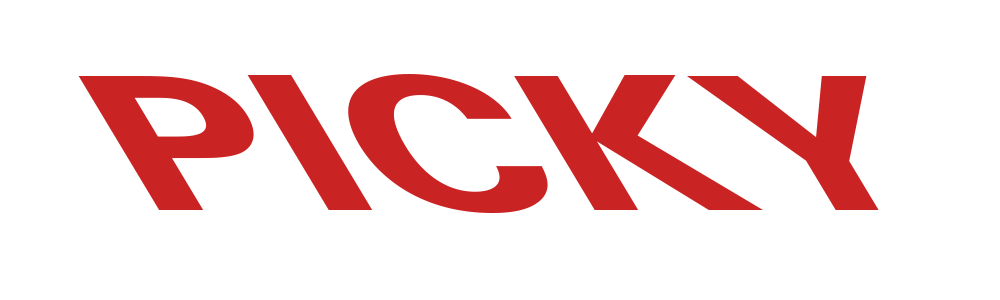
<style>
.page{position:relative;width:1000px;height:300px;background:#ffffff}
.page>*{position:absolute;margin:0}
.t1{font:253.1px "Univers-BoldOblique";color:#c92323;scale:1.11 1}
</style>
<div class="page">
<p class="t1" style="left:78px;top:74px;width:801px;height:139px">PICKY</p>
</div>
